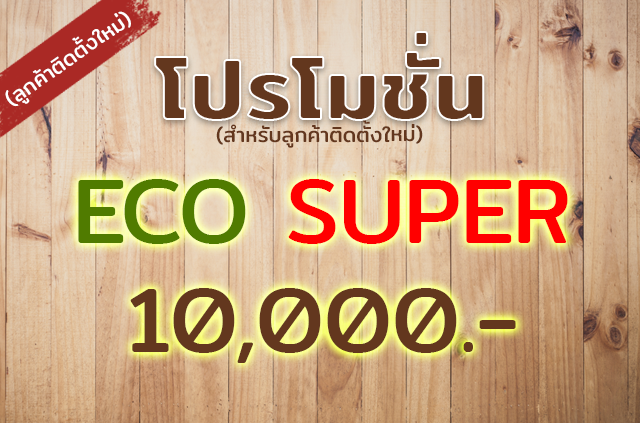
<style>
.page{position:relative;width:640px;height:423px}
.page>*{position:absolute;margin:0}
.t1{font:20.8px "Mitr-Regular";color:#ffffff}
.t2{font:87.5px "Mitr-SemiBold";color:#63371e}
.t3{font:20.8px "Mitr-Regular";color:#63371e}
.t4{font:91.7px "Mitr-Regular";color:#ff0000}
.t5{font:91.7px "Mitr-Regular";color:#507b00}
.t6{font:91.7px "Mitr-Regular";color:#63371e}
</style>
<div class="page">
<p class="t1" style="left:5px;top:11px;width:126px;height:96px;rotate:-35deg">(ลูกค้าติดตั้งใหม่)</p>
<p class="t2" style="left:154px;top:31px;width:331px;height:90px">โปรโมชั่น</p>
<p class="t3" style="left:216px;top:120px;width:207px;height:28px">(สำหรับลูกค้าติดตั้งใหม่)</p>
<p class="t4" style="left:78px;top:179px;width:490px;height:65px"><span class="t5">ECO </span>SUPER</p>
<p class="t6" style="left:130px;top:288px;width:386px;height:75px">10,000.-</p>
</div>
